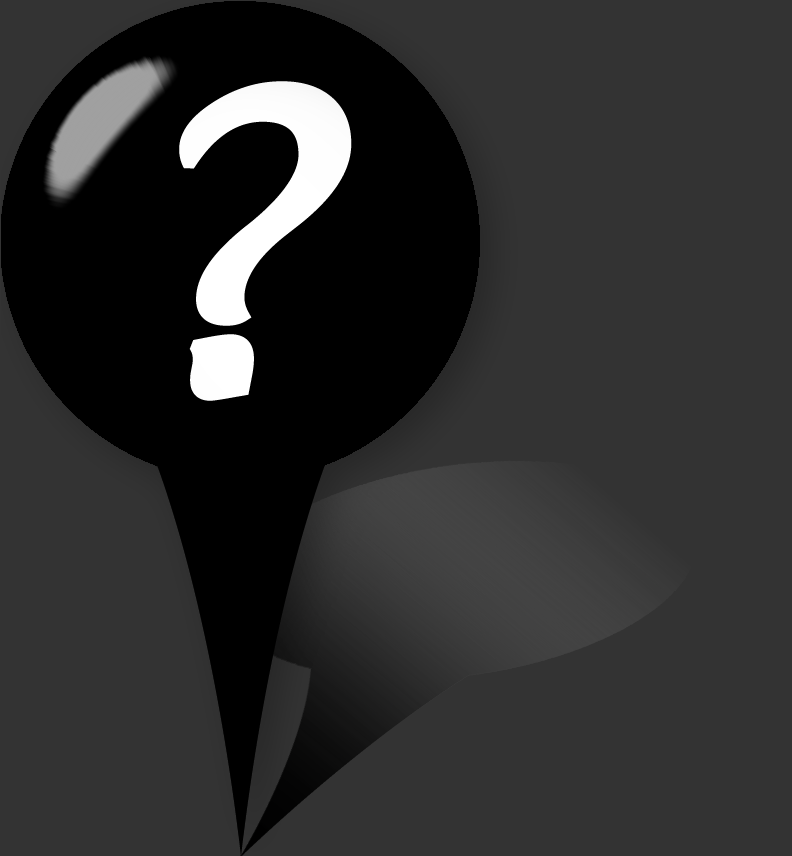
<style>
.page{position:relative;width:792px;height:856px;background:#333333}
.page>*{position:absolute;margin:0}
.t1{font:416.7px "LucidaHandwriting-Italic";letter-spacing:-0.025em;color:#ffffff;font-weight:bold}
</style>
<div class="page">
<p class="t1" style="left:179px;top:81px;width:173px;height:320px">?</p>
</div>
